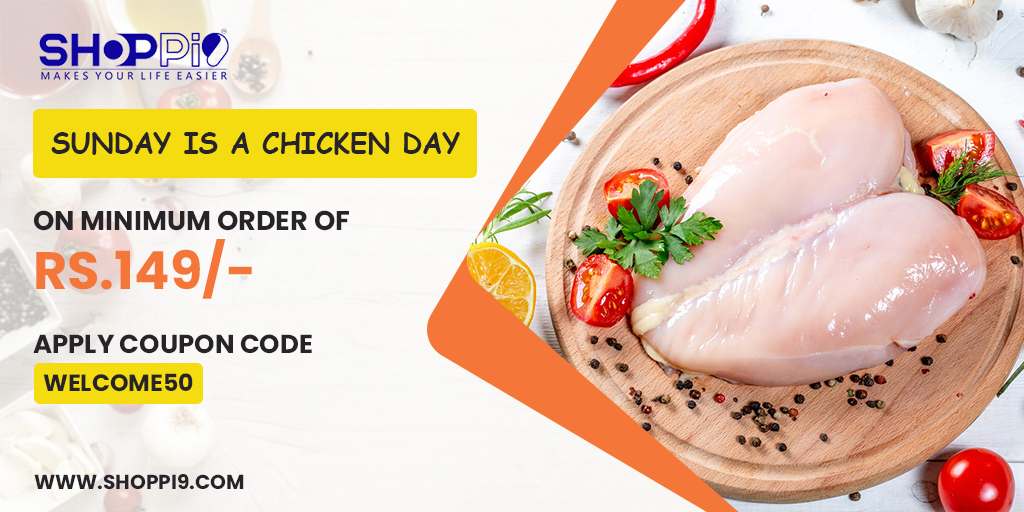
<style>
.page{position:relative;width:1024px;height:512px}
.page>*{position:absolute;margin:0}
.t1{font:27.8px "ComicSansMS-Bold";color:#262429;text-transform:uppercase}
.t2{font:27.2px "Poppins-Bold";color:#262429;text-transform:uppercase}
.t3{font:52.5px "Poppins-Bold";color:#f47739;text-transform:uppercase}
.t4{font:26px "Poppins-Bold";color:#262429;text-transform:uppercase}
.t5{font:23.6px "Poppins-Bold";color:#262429;text-transform:uppercase}
.t6{font:20.1px "Poppins-Bold";color:#262429;text-transform:uppercase}
</style>
<div class="page">
<p class="t1" style="left:51px;top:132px;width:409px;height:23px">Sunday is a chicken day</p>
<p class="t2" style="left:34px;top:210px;width:315px;height:21px">on Minimum order of</p>
<p class="t3" style="left:36px;top:239px;width:216px;height:60px">Rs.149/-</p>
<p class="t4" style="left:33px;top:334px;width:279px;height:20px">Apply Coupon Code</p>
<p class="t5" style="left:43px;top:373px;width:150px;height:19px">welcome50</p>
<p class="t6" style="left:34px;top:474px;width:210px;height:16px">www.shoppi9.com</p>
</div>
